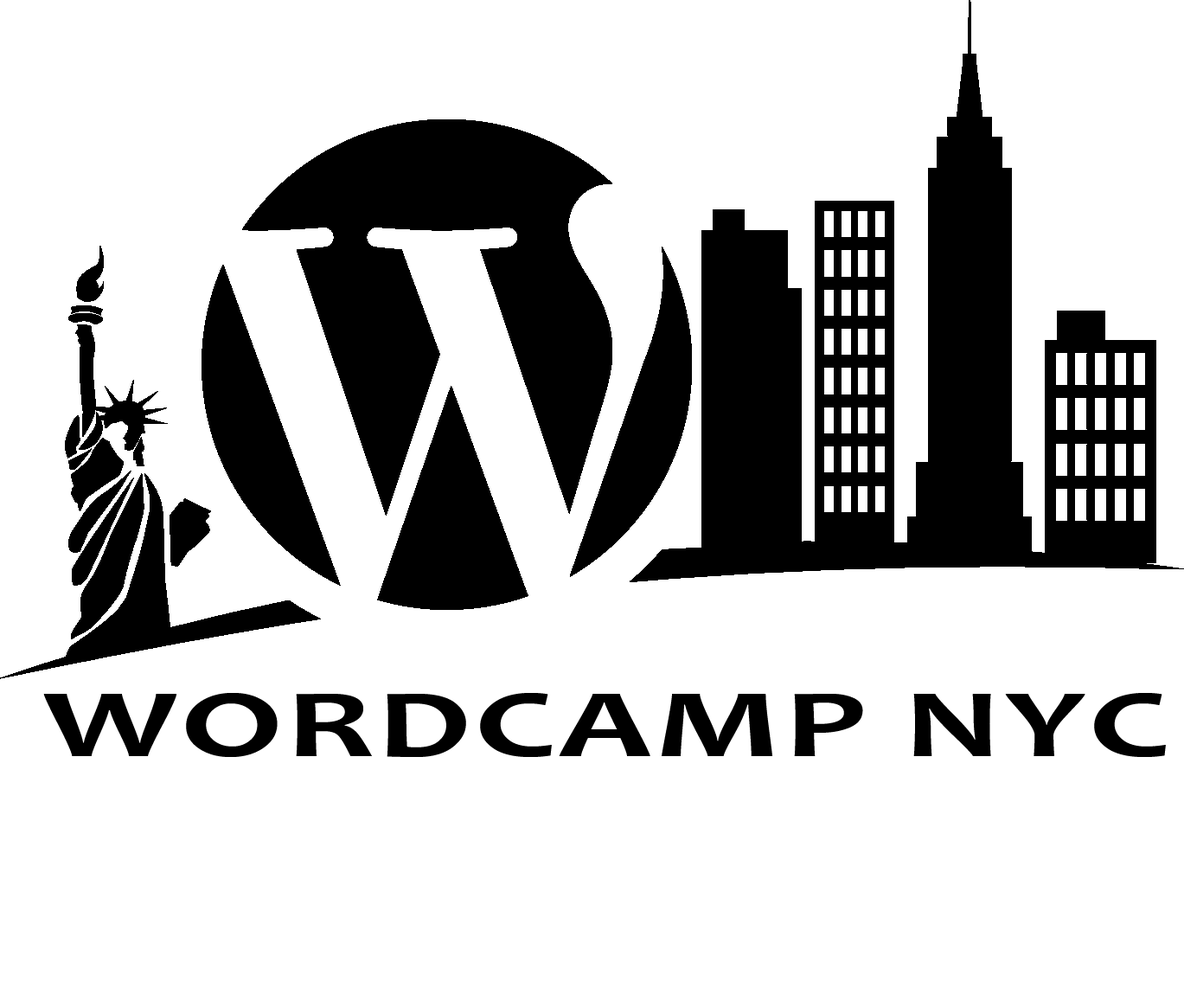
<style>
.page{position:relative;width:1184px;height:1007px;background:#ffffff}
.page>*{position:absolute;margin:0}
.t1{font:97.3px "Candara-Bold";letter-spacing:0.025em;color:#010101;scale:1.5 1}
</style>
<div class="page">
<p class="t1" style="left:43px;top:693px;width:1123px;height:64px">WORDCAMP NYC</p>
</div>
